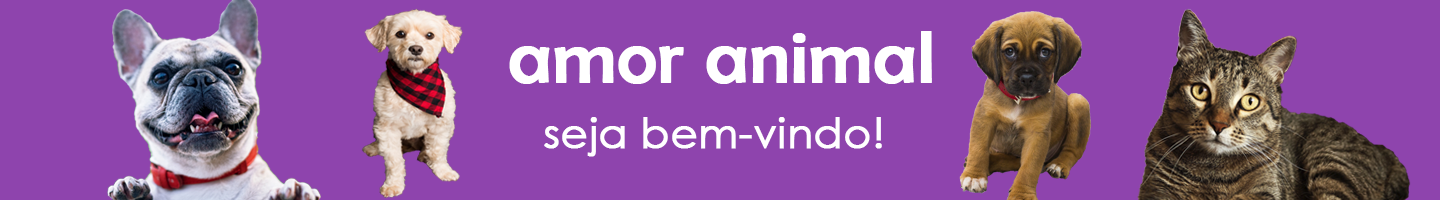
<style>
.page{position:relative;width:1440px;height:200px;background:#8e44ad}
.page>*{position:absolute;margin:0}
.t1{font:75px "BerlinSansFB-Reg";color:#ffffff;font-weight:bold}
.t2{font:41.7px "CenturyGothic";color:#ffffff;font-weight:bold}
</style>
<div class="page">
<p class="t1" style="left:509px;top:31px;width:423px;height:53px">amor animal</p>
<p class="t2" style="left:544px;top:117px;width:338px;height:40px">seja bem-vindo!</p>
</div>
